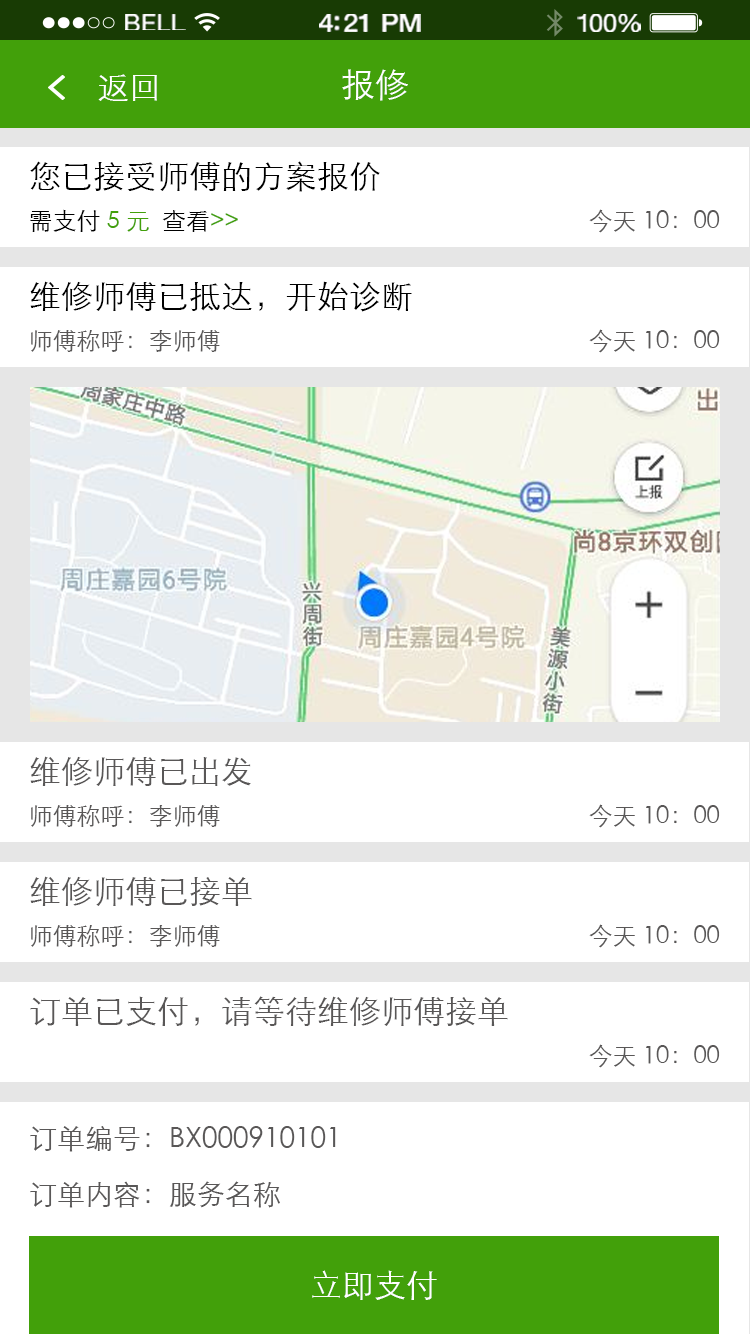
<style>
.page{position:relative;width:750px;height:1334px;background:#ffffff}
.page>*{position:absolute;margin:0}
.t1{font:23.3px "HelveticaNeue";letter-spacing:0.02em;color:#ffffff;scale:1.06 1}
.t2{font:25.3px "HelveticaNeue-Medium";letter-spacing:-0.02em;color:#ffffff;scale:1.06 1}
.t3{font:24.3px "HelveticaNeue";letter-spacing:-0.02em;color:#ffffff;scale:1.06 1}
.t4{font:32px "STXihei";color:#ffffff}
.t5{font:34px "STXihei";color:#ffffff}
.t6{font:32px "STXihei";color:#000000}
.t7{font:24px "STXihei";color:#000000}
.t8{font:24px "STXihei";color:#42a00a}
.t9{font:24px "STXihei";color:#595757}
.t10{font:32px "STXihei";color:#595757}
</style>
<div class="page">
<p class="t1" style="left:125px;top:14px;width:61px;height:16px">BELL</p>
<p class="t2" style="left:319px;top:14px;width:102px;height:18px">4:21 PM</p>
<p class="t3" style="left:577px;top:14px;width:64px;height:18px">100%</p>
<p class="t4" style="left:98px;top:74px;width:59px;height:27px">返回</p>
<p class="t5" style="left:342px;top:69px;width:66px;height:32px">报修</p>
<p class="t6" style="left:30px;top:161px;width:350px;height:31px">您已接受师傅的方案报价</p>
<p class="t7" style="left:30px;top:209px;width:208px;height:23px">需支付 <span class="t8">5 元  </span>查看<span class="t8">&gt;&gt;</span></p>
<p class="t9" style="left:589px;top:209px;width:131px;height:24px">今天 10：00</p>
<p class="t6" style="left:30px;top:281px;width:382px;height:31px">维修师傅已抵达，开始诊断</p>
<p class="t9" style="left:589px;top:329px;width:131px;height:24px">今天 10：00</p>
<p class="t9" style="left:31px;top:330px;width:189px;height:22px">师傅称呼：李师傅</p>
<p class="t10" style="left:30px;top:756px;width:221px;height:30px">维修师傅已出发</p>
<p class="t9" style="left:31px;top:805px;width:189px;height:22px">师傅称呼：李师傅</p>
<p class="t9" style="left:589px;top:804px;width:131px;height:24px">今天 10：00</p>
<p class="t10" style="left:30px;top:876px;width:222px;height:30px">维修师傅已接单</p>
<p class="t9" style="left:31px;top:925px;width:189px;height:22px">师傅称呼：李师傅</p>
<p class="t9" style="left:589px;top:924px;width:131px;height:24px">今天 10：00</p>
<p class="t10" style="left:30px;top:996px;width:478px;height:30px">订单已支付，请等待维修师傅接单</p>
<p class="t9" style="left:589px;top:1044px;width:131px;height:24px">今天 10：00</p>
<p class="t4" style="left:312px;top:1270px;width:125px;height:30px">立即支付</p>
</div>
